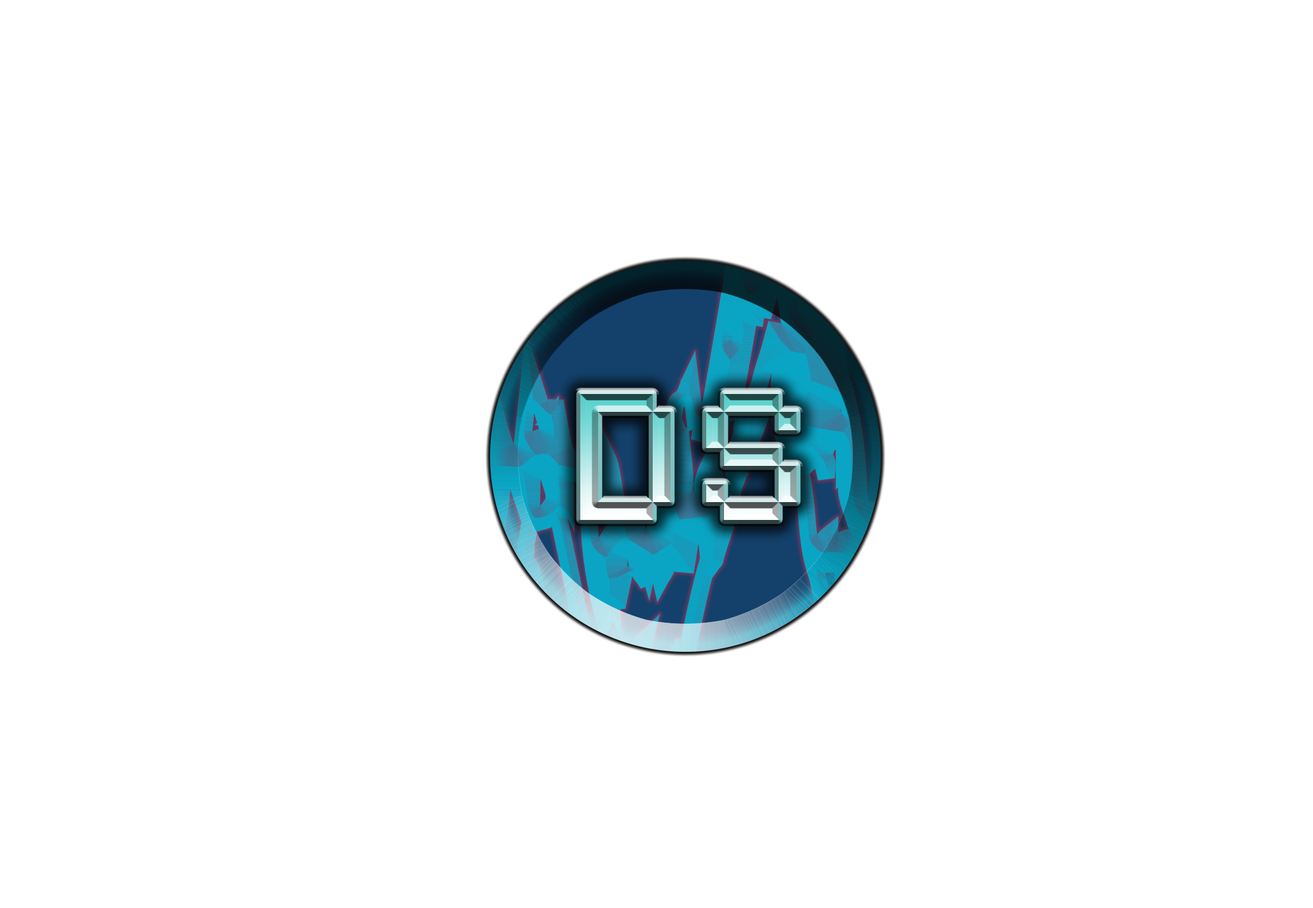
<style>
.page{position:relative;width:1313px;height:908px;background:#ffffff}
.page>*{position:absolute;margin:0}
.t1{font:180.2px "SFPixelate"}
</style>
<div class="page">
<p class="t1" style="left:580px;top:394px;width:217px;height:126px">DS</p>
</div>
